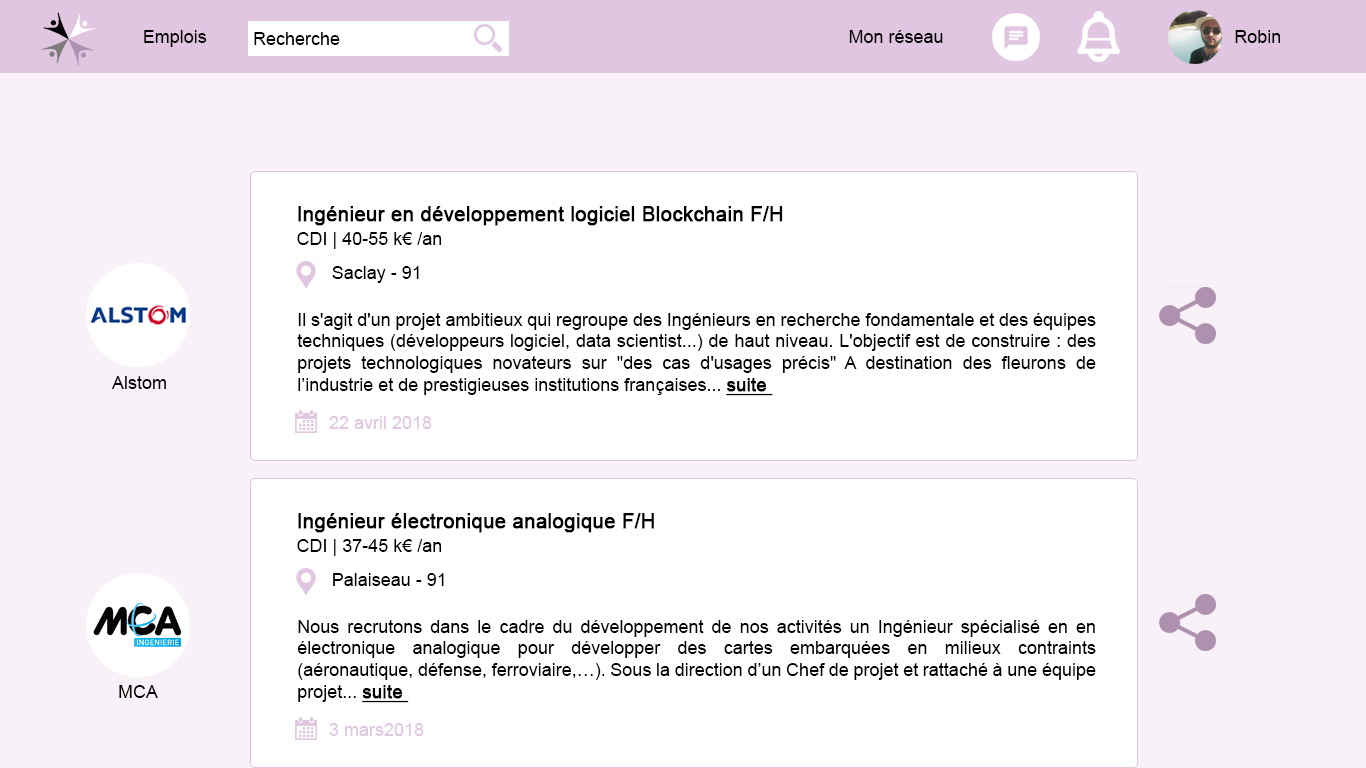
<style>
.page{position:relative;width:1366px;height:768px;background:#ffffff}
.page>*{position:absolute;margin:0}
.t1{font:18px "ArialMT";color:#000000}
.t2{font:20px "ArialMT";color:#000000;font-weight:bold}
.t3{font:18px "ArialMT";color:#000000;font-weight:bold;text-decoration:underline}
.t4{font:18px "ArialMT";color:#e0c6e1}
</style>
<div class="page">
<p class="t1" style="left:144px;top:30px;width:63px;height:17px">Emplois</p>
<p class="t1" style="left:849px;top:30px;width:94px;height:13px">Mon réseau</p>
<p class="t1" style="left:1235px;top:30px;width:46px;height:13px">Robin</p>
<p class="t1" style="left:254px;top:32px;width:86px;height:13px">Recherche</p>
<p class="t2" style="left:298px;top:206px;width:485px;height:20px">Ingénieur en développement logiciel Blockchain F/H</p>
<p class="t1" style="left:297px;top:232px;width:145px;height:17px">CDI | 40-55 k€ /an</p>
<p class="t1" style="left:332px;top:266px;width:87px;height:17px">Saclay - 91</p>
<p class="t1" style="left:297px;top:313px;width:799px;height:83px;text-align:justify">Il s'agit d'un projet ambitieux qui regroupe des Ingénieurs en recherche fondamentale et des équipes techniques (développeurs logiciel, data scientist...) de haut niveau. L'objectif est de construire : des projets technologiques novateurs sur "des cas d'usages précis" A destination des fleurons de l’industrie et de prestigieuses institutions françaises... <span class="t3">suite <br></span>(Engie, PSA, Alstom, CDC, BNP Paribas...)<br><br>- Sur des thématiques porteuses (IoT, Smart cities, voiture intelligente, Blockchain...)</p>
<p class="t1" style="left:111px;top:376px;width:55px;height:13px">Alstom</p>
<p class="t4" style="left:329px;top:416px;width:103px;height:13px">22 avril 2018</p>
<p class="t2" style="left:298px;top:513px;width:356px;height:20px">Ingénieur électronique analogique F/H</p>
<p class="t1" style="left:297px;top:539px;width:145px;height:17px">CDI | 37-45 k€ /an</p>
<p class="t1" style="left:333px;top:573px;width:111px;height:13px">Palaiseau - 91</p>
<p class="t1" style="left:297px;top:620px;width:799px;height:83px;text-align:justify">Nous recrutons dans le cadre du développement de nos activités un Ingénieur spécialisé en en électronique analogique pour développer des cartes embarquées en milieux contraints (aéronautique, défense, ferroviaire,…). Sous la direction d’un Chef de projet et rattaché à une équipe projet... <span class="t3">suite <br></span>(Engie, PSA, Alstom, CDC, BNP Paribas...)<br><br>- Sur des thématiques porteuses (IoT, Smart cities, voiture intelligente, Blockchain...)</p>
<p class="t1" style="left:119px;top:685px;width:39px;height:13px">MCA</p>
<p class="t4" style="left:329px;top:723px;width:95px;height:13px">3 mars2018</p>
</div>
